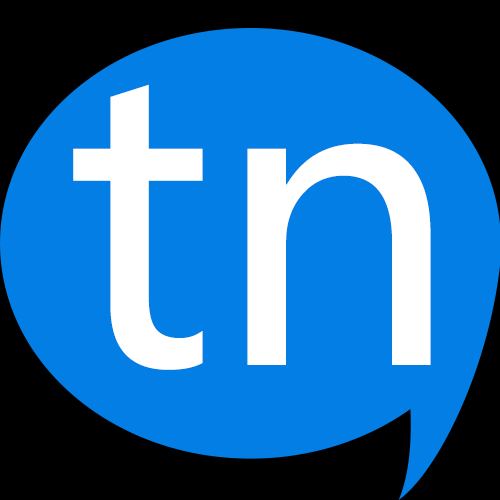
<style>
.page{position:relative;width:500px;height:500px;background:#027ee4}
.page>*{position:absolute;margin:0}
.t1{font:400px "MicrosoftYaHei";color:#ffffff}
</style>
<div class="page">
<p class="t1" style="left:73px;top:84px;width:358px;height:286px">tn</p>
</div>
